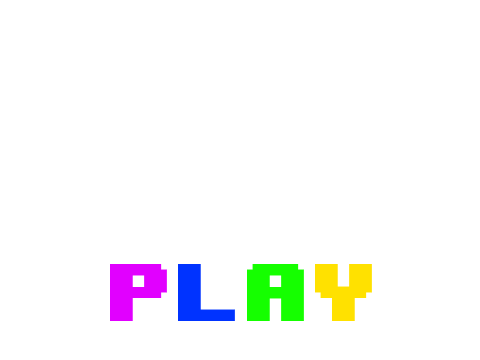
<style>
.page{position:relative;width:480px;height:360px;background:#ffffff}
.page>*{position:absolute;margin:0}
.t1{font:68.2px "8BITWONDERNominal";color:#e100ff}
.t2{font:68.2px "8BITWONDERNominal";color:#0033ff}
.t3{font:68.2px "8BITWONDERNominal";color:#15ff00}
.t4{font:68.2px "8BITWONDERNominal";color:#ffe100}
</style>
<div class="page">
<p class="t1" style="left:110px;top:264px;width:262px;height:57px">p<span class="t2">l</span><span class="t3">a</span><span class="t4">y</span></p>
</div>
